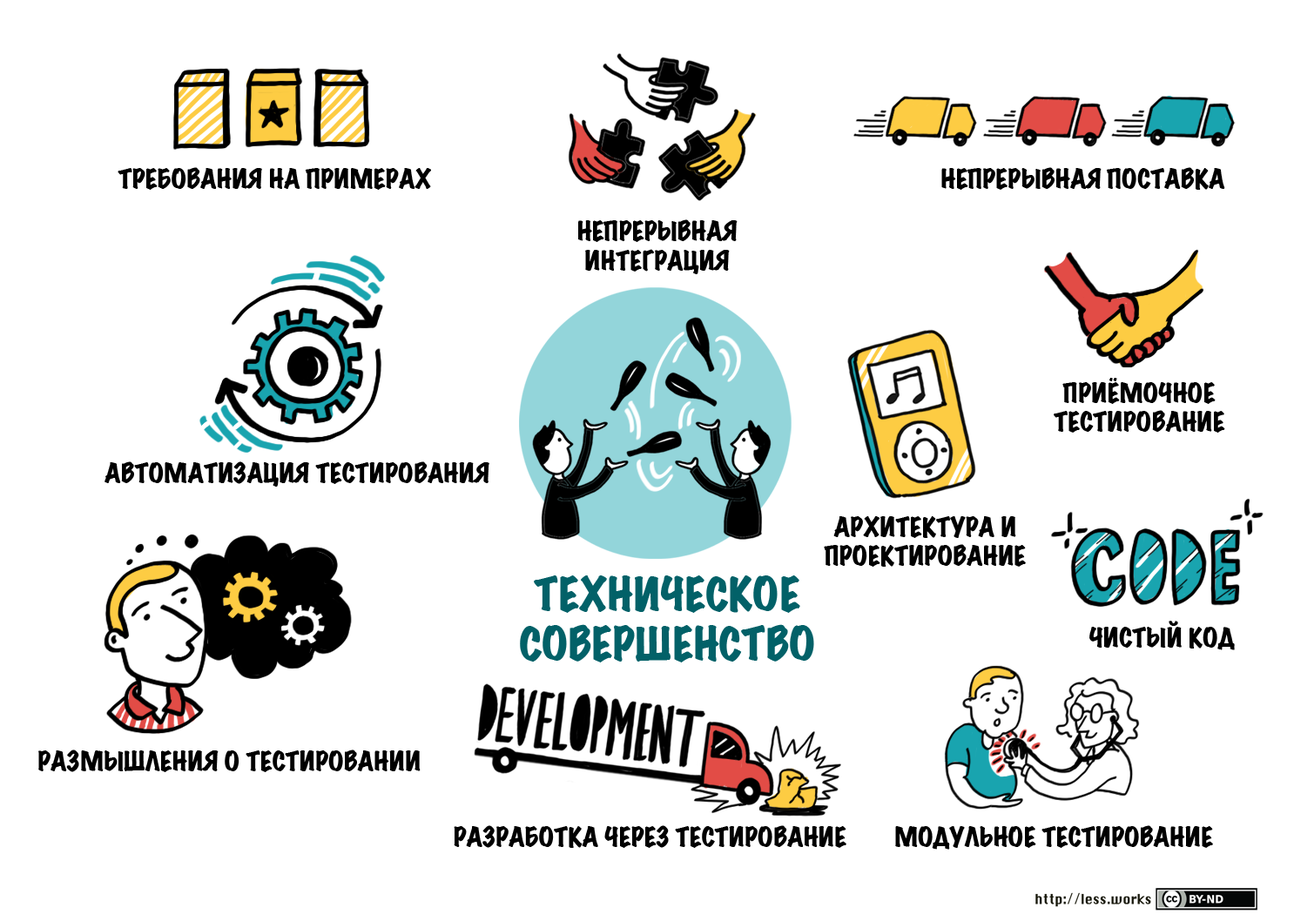
<style>
.page{position:relative;width:1294px;height:921px;background:#ffffff}
.page>*{position:absolute;margin:0}
.t1{font:24.4px "MarkerFelt-Wide";color:#000000}
.t2{font:41.8px "MarkerFelt-Wide";color:#026168}
</style>
<div class="page">
<p class="t1" style="left:118px;top:167px;width:313px;height:23px">ТРЕБОВАНИЯ НА ПРИМЕРАХ</p>
<p class="t1" style="left:941px;top:167px;width:284px;height:23px">НЕПРЕРЫВНАЯ ПОСТАВКА</p>
<p class="t1" style="left:578px;top:219px;width:160px;height:55px;text-align:center">НЕПРЕРЫВНАЯ ИНТЕГРАЦИЯ</p>
<p class="t1" style="left:1054px;top:378px;width:171px;height:55px;text-align:center">ПРИЁМОЧНОЕ ТЕСТИРОВАНИЕ</p>
<p class="t1" style="left:105px;top:462px;width:384px;height:25px">АВТОМАТИЗАЦИЯ ТЕСТИРОВАНИЯ</p>
<p class="t1" style="left:824px;top:516px;width:202px;height:51px;text-align:center">АРХИТЕКТУРА И ПРОЕКТИРОВАНИЕ</p>
<p class="t2" style="left:520px;top:576px;width:294px;height:87px;text-align:center">ТЕХНИЧЕСКОЕ СОВЕРШЕНСТВО</p>
<p class="t1" style="left:1089px;top:621px;width:146px;height:30px">ЧИСТЫЙ КОД</p>
<p class="t1" style="left:38px;top:750px;width:383px;height:22px">РАЗМЫШЛЕНИЯ О ТЕСТИРОВАНИИ</p>
<p class="t1" style="left:454px;top:826px;width:393px;height:22px">РАЗРАБОТКА ЧЕРЕЗ ТЕСТИРОВАНИЕ</p>
<p class="t1" style="left:895px;top:826px;width:318px;height:24px">МОДУЛЬНОЕ ТЕСТИРОВАНИЕ</p>
</div>
